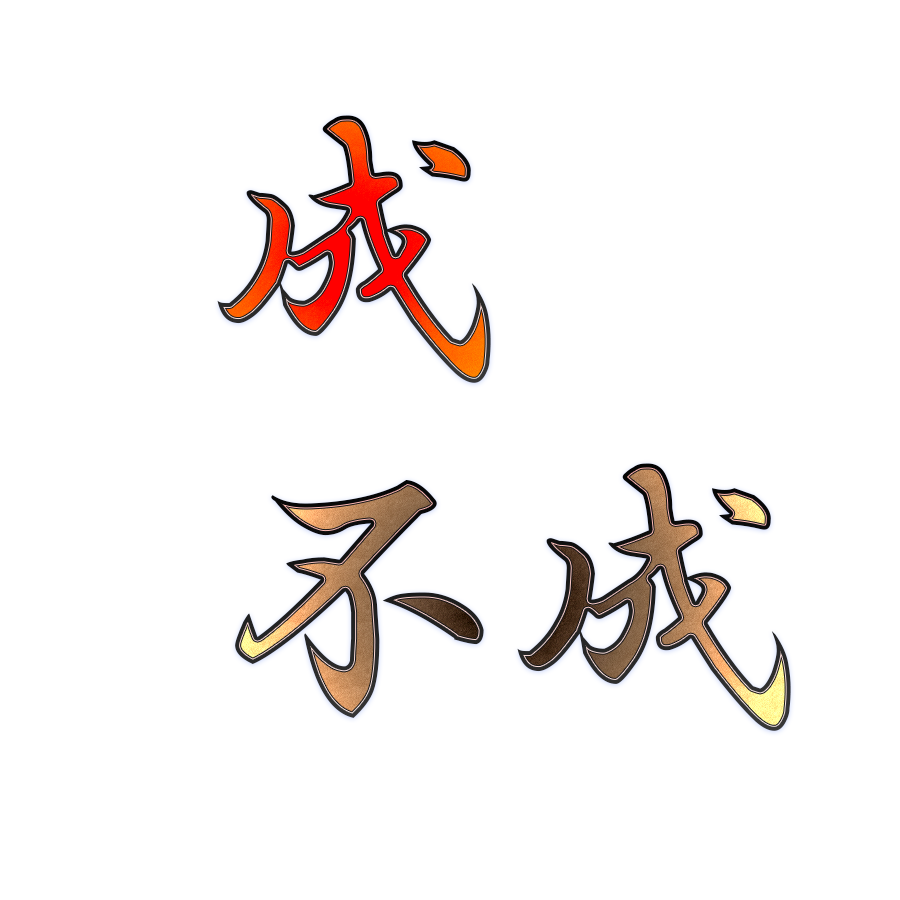
<style>
.page{position:relative;width:900px;height:900px;background:#ffffff}
.page>*{position:absolute;margin:0}
.t1{font:300px "HGSGyoshotai"}
</style>
<div class="page">
<p class="t1" style="left:217px;top:115px;width:274px;height:268px">成</p>
<p class="t1" style="left:235px;top:463px;width:556px;height:268px">不成</p>
</div>
